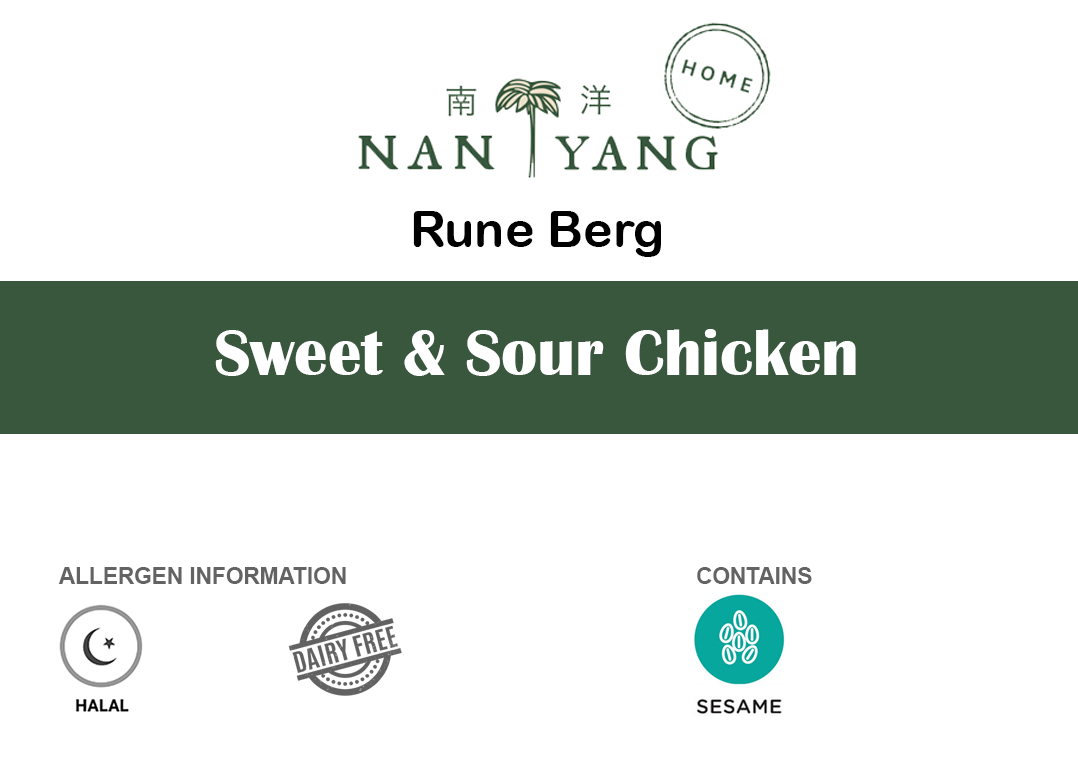
<style>
.page{position:relative;width:1078px;height:768px;background:#ffffff}
.page>*{position:absolute;margin:0}
.t1{font:50px "ArialRoundedMTBold";color:#000000}
.t2{font:66.7px "BritannicBold";color:#ffffff}
.t3{font:22.6px "Arial-BoldMT";color:#636363}
</style>
<div class="page">
<p class="t1" style="left:413px;top:211px;width:248px;height:46px">Rune Berg</p>
<p class="t2" style="left:215px;top:329px;width:641px;height:47px">Sweet &amp; Sour Chicken</p>
<p class="t3" style="left:58px;top:567px;width:288px;height:17px">ALLERGEN INFORMATION</p>
<p class="t3" style="left:697px;top:567px;width:115px;height:17px">CONTAINS</p>
</div>
